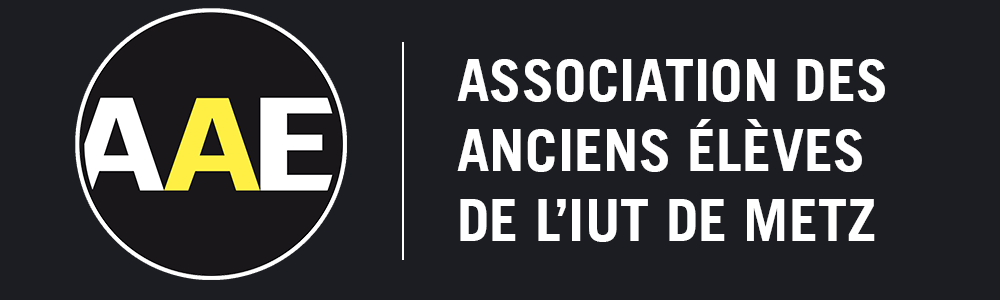
<style>
.page{position:relative;width:1000px;height:300px;background:#1c1d22}
.page>*{position:absolute;margin:0}
.t1{font:58.4px "TradeGothicLT-Bold";color:#ffffff}
</style>
<div class="page">
<p class="t1" style="left:457px;top:59px;width:428px;height:183px">ASSOCIATION DES<br>ANCIENS ÉLÈVES<br>DE L’IUT DE METZ</p>
</div>
